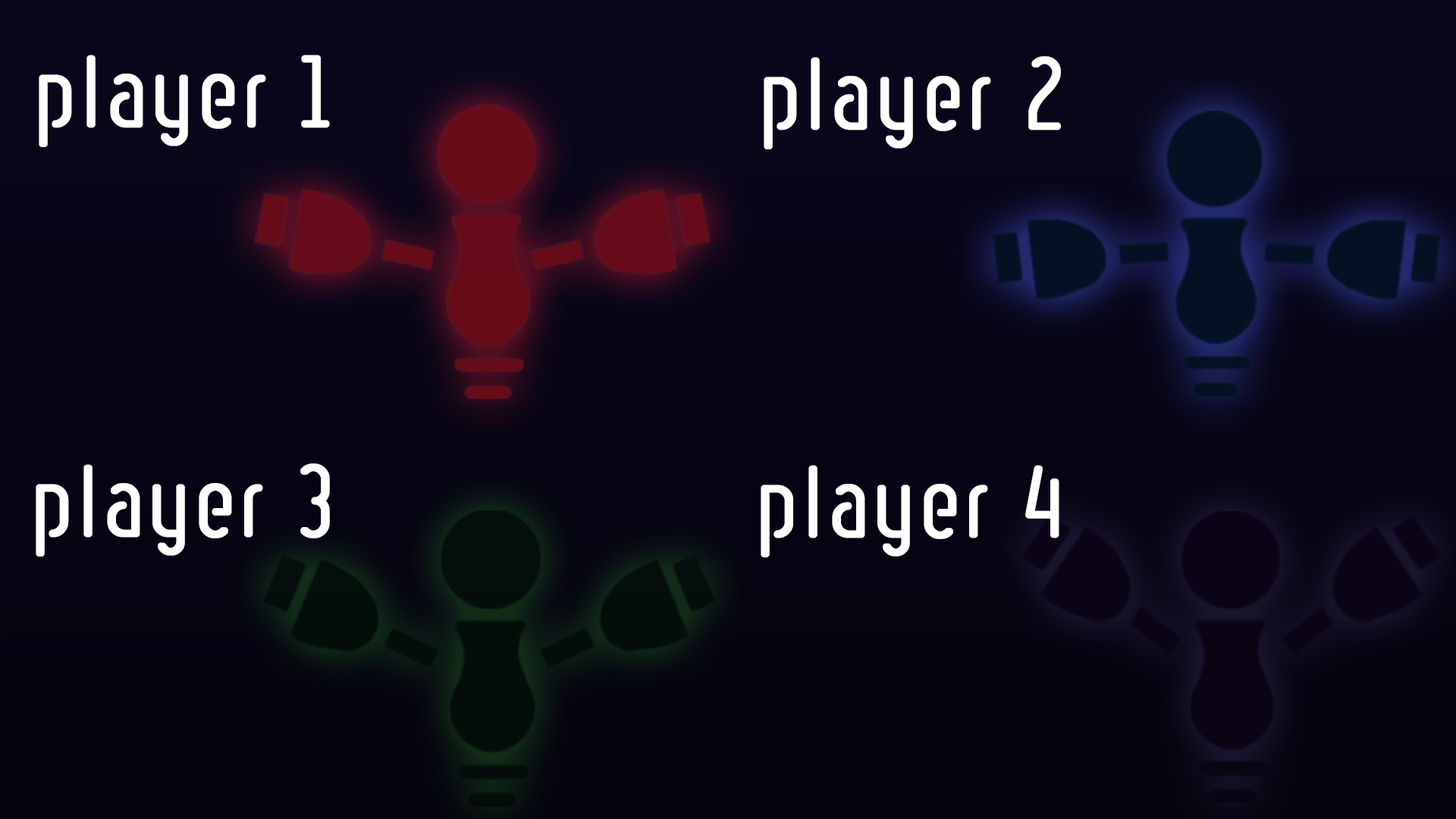
<style>
.page{position:relative;width:1456px;height:819px}
.page>*{position:absolute;margin:0}
.t1{font:75.7px "RulerStencil";color:#ffffff;font-weight:bold}
.t2{font:75.8px "RulerStencil";color:#ffffff;font-weight:bold}
</style>
<div class="page">
<p class="t1" style="left:39px;top:55px;width:291px;height:92px">player 1</p>
<p class="t2" style="left:764px;top:56px;width:297px;height:93px">player 2</p>
<p class="t1" style="left:36px;top:463px;width:294px;height:94px">player 3</p>
<p class="t1" style="left:761px;top:465px;width:298px;height:92px">player 4</p>
</div>
